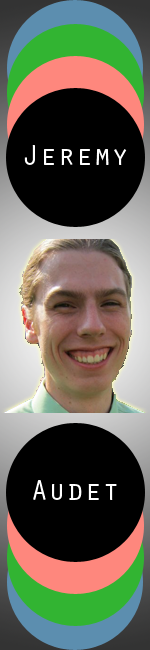
<style>
.page{position:relative;width:150px;height:650px;background:#000000}
.page>*{position:absolute;margin:0}
.t1{font:30px "OratorStd";color:#ffffff}
</style>
<div class="page">
<p class="t1" style="left:24px;top:145px;width:103px;height:20px">Jeremy</p>
<p class="t1" style="left:33px;top:480px;width:84px;height:20px">Audet</p>
</div>
